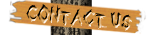
<style>
.page{position:relative;width:150px;height:35px;background:#ffffff}
.page>*{position:absolute;margin:0}
.t1{font:20px "Uneasy";font-weight:bold;scale:0.75 1}
</style>
<div class="page">
<p class="t1" style="left:26px;top:4px;width:106px;height:27px;rotate:4deg">Contact Us</p>
</div>
